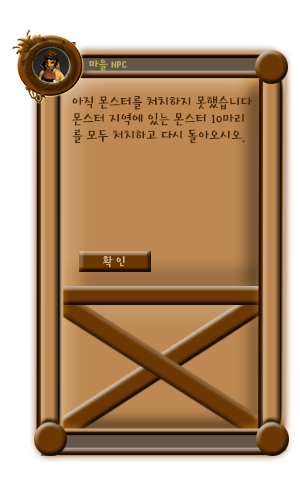
<style>
.page{position:relative;width:300px;height:500px;background:#ffffff}
.page>*{position:absolute;margin:0}
.t1{font:12px "HoonMakdR";color:#bdaf51}
.t2{font:14px "HoonMakdR";color:#472500}
.t3{font:12px "HoonMakdR";color:#d8ae82}
</style>
<div class="page">
<p class="t1" style="left:89px;top:59px;width:38px;height:12px">마을 NPC</p>
<p class="t2" style="left:72px;top:96px;width:180px;height:48px">아직 몬스터를 처치하지 못했습니다<br>몬스터 지역에 있는 몬스터 10마리<br>를 모두 처치하고 다시 돌아오시오.</p>
<p class="t3" style="left:103px;top:256px;width:22px;height:12px">확 인</p>
</div>
